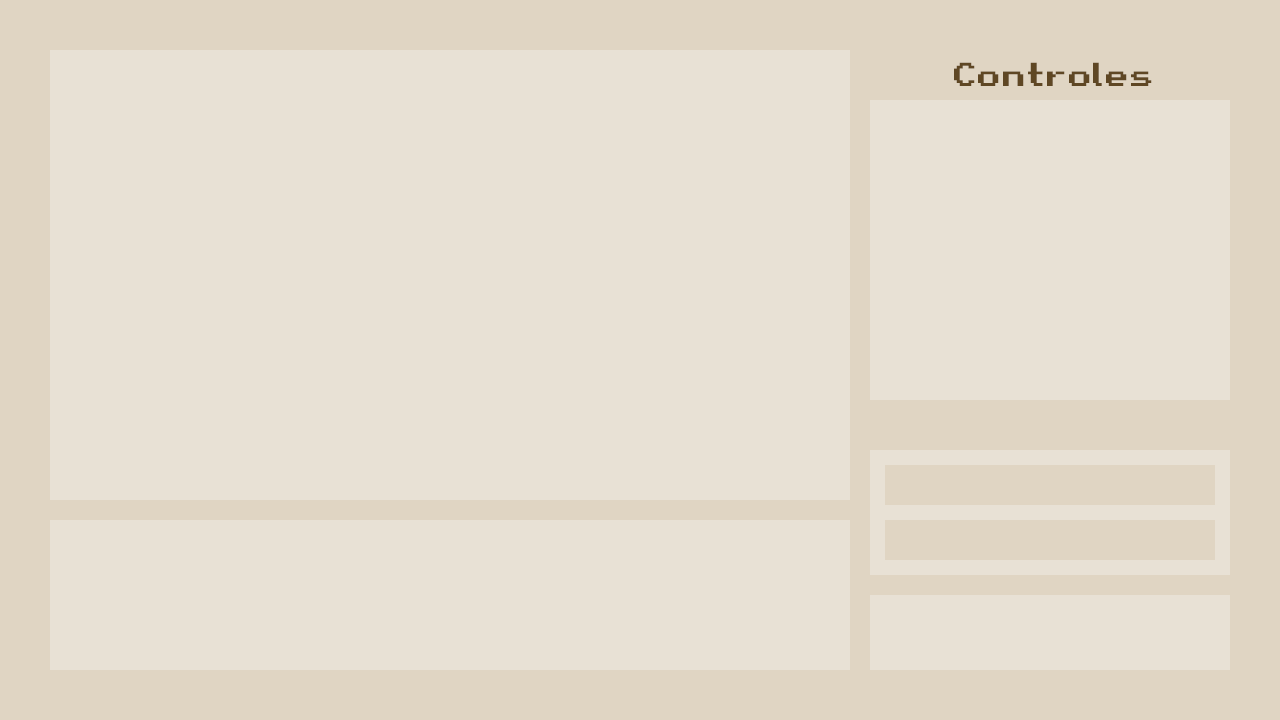
<style>
.page{position:relative;width:1280px;height:720px;background:#e8e1d5}
.page>*{position:absolute;margin:0}
.t1{font:32px "RetroGaming";color:#5f4724}
</style>
<div class="page">
<p class="t1" style="left:954px;top:62px;width:198px;height:24px">Controles</p>
</div>
